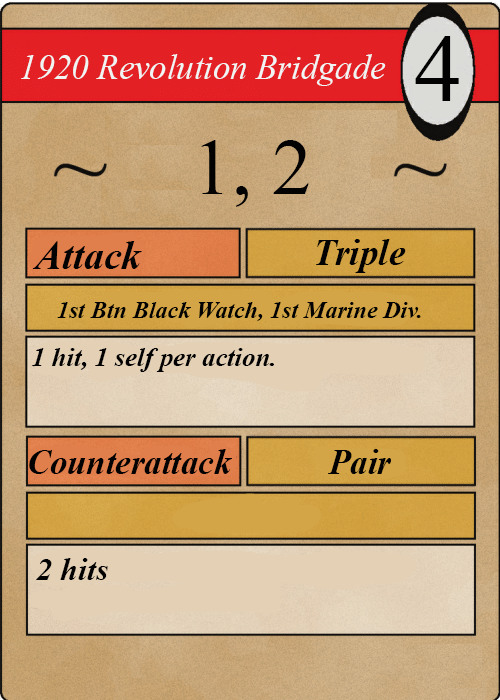
<style>
.page{position:relative;width:500px;height:700px}
.page>*{position:absolute;margin:0}
.t1{font:96px "TimesNewRomanPSMT";color:#020202}
.t2{font:34.7px "TimesNewRomanPS-ItalicMT";color:#f0f5f4}
.t3{font:80px "TimesNewRomanPSMT";color:#020202}
.t4{font:40px "TimesNewRomanPS-BoldItalicMT";color:#020202}
.t5{font:37.3px "TimesNewRomanPS-BoldItalicMT";color:#020202}
.t6{font:24px "TimesNewRomanPS-BoldItalicMT";color:#020202}
.t7{font:26.7px "TimesNewRomanPS-BoldItalicMT";color:#020202}
.t8{font:34.7px "TimesNewRomanPS-BoldItalicMT";color:#020202}
.t9{font:32px "TimesNewRomanPS-BoldItalicMT";color:#020202}
</style>
<div class="page">
<p class="t1" style="left:415px;top:36px;width:44px;height:65px">4</p>
<p class="t2" style="left:21px;top:54px;width:365px;height:32px">1920 Revolution Bridgade</p>
<p class="t3" style="left:201px;top:140px;width:108px;height:67px">1, 2</p>
<p class="t4" style="left:32px;top:241px;width:110px;height:28px">Attack</p>
<p class="t5" style="left:316px;top:239px;width:90px;height:34px">Triple</p>
<p class="t6" style="left:57px;top:302px;width:364px;height:19px">1st Btn Black Watch, 1st Marine Div.</p>
<p class="t7" style="left:32px;top:348px;width:242px;height:24px">1 hit, 1 self per action.</p>
<p class="t8" style="left:29px;top:449px;width:203px;height:25px">Counterattack</p>
<p class="t8" style="left:328px;top:449px;width:63px;height:25px">Pair</p>
<p class="t9" style="left:36px;top:558px;width:72px;height:22px">2 hits</p>
</div>
